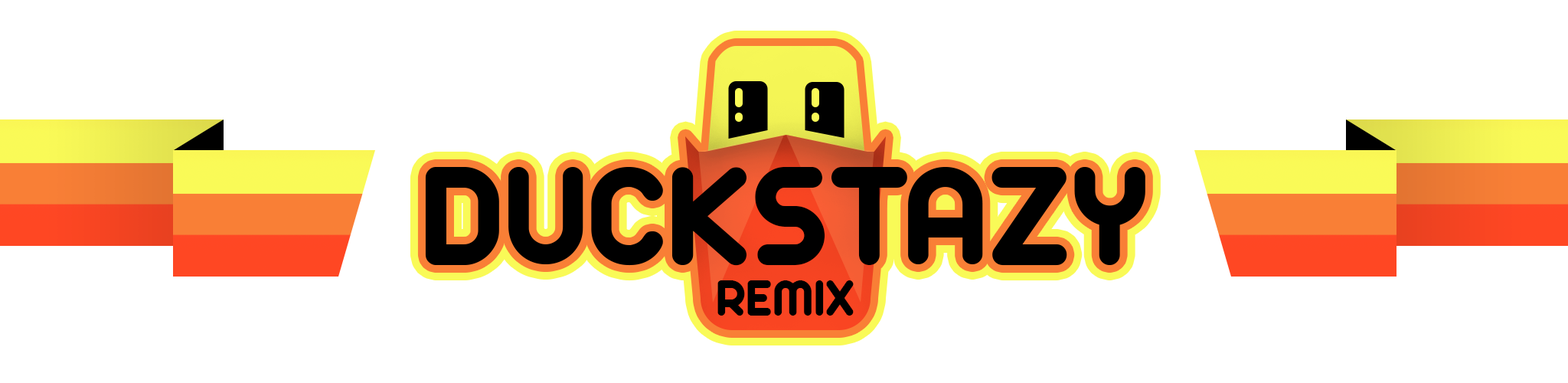
<style>
.page{position:relative;width:1568px;height:383px;background:#ffffff}
.page>*{position:absolute;margin:0}
.t1{font:153.1px "Arista2.0";color:#000000}
.t2{font:55.1px "Arista2.0";color:#000000}
</style>
<div class="page">
<p class="t1" style="left:425px;top:167px;width:720px;height:99px">DUCKSTAZY</p>
<p class="t2" style="left:717px;top:280px;width:137px;height:35px">REMIX</p>
</div>
